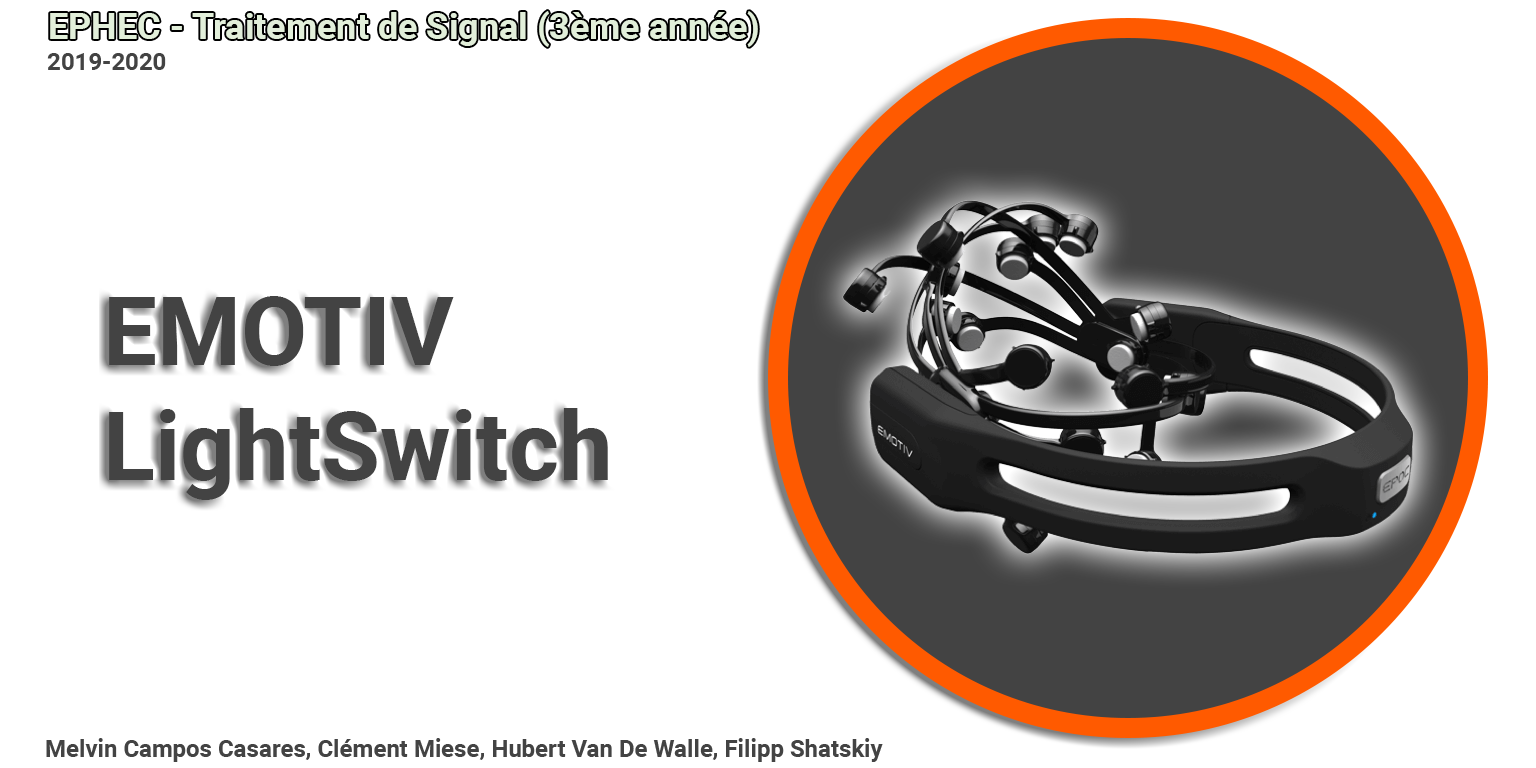
<style>
.page{position:relative;width:1536px;height:768px;background:#ffffff}
.page>*{position:absolute;margin:0}
.t1{font:24px "Roboto-Bold";color:#434343}
.t2{font:96px "Roboto-Bold";color:#434343}
</style>
<div class="page">
<p class="t1" style="left:47px;top:53px;width:119px;height:17px">2019-2020</p>
<p class="t2" style="left:109px;top:296px;width:499px;height:204px">EMOTIV<br>LightSwitch</p>
<p class="t1" style="left:46px;top:738px;width:837px;height:24px">Melvin Campos Casares, Clément Miese, Hubert Van De Walle, Filipp Shatskiy</p>
</div>
